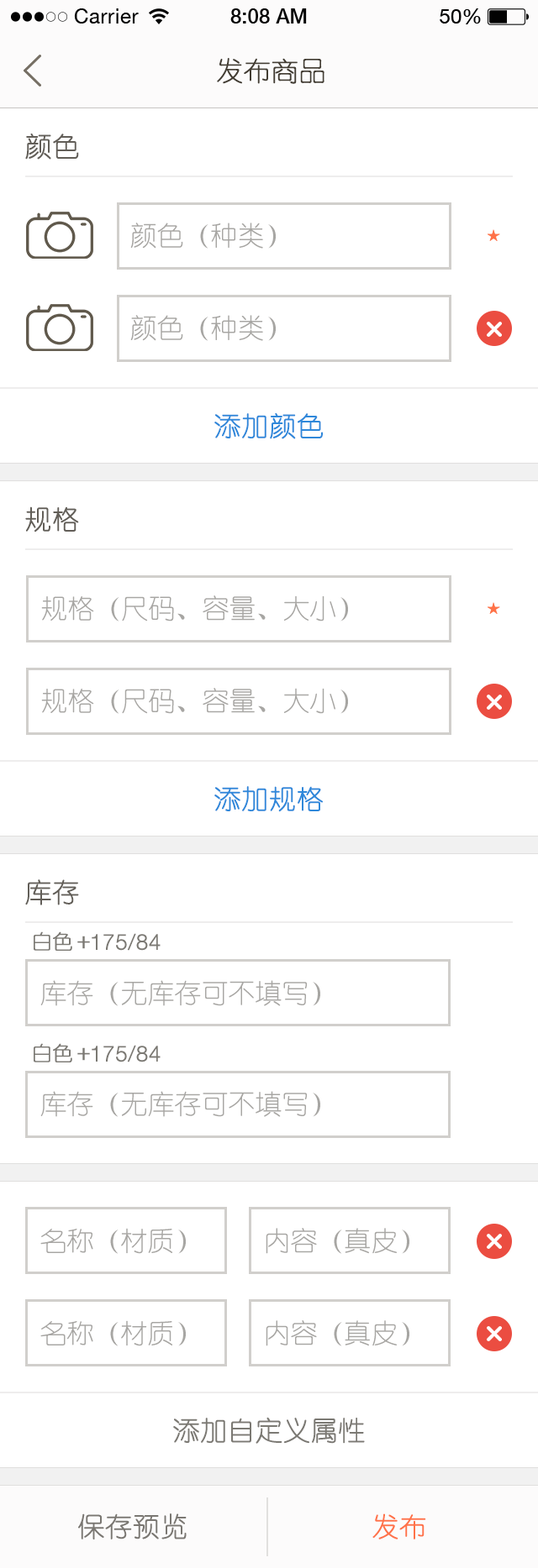
<style>
.page{position:relative;width:538px;height:1568px;background:#ffffff}
.page>*{position:absolute;margin:0}
.t1{font:26.9px "YouYuan";color:#433d33;text-transform:uppercase;font-weight:bold}
.t2{font:26.9px "YouYuan";color:#625e58;text-transform:uppercase;font-weight:bold}
.t3{font:26.9px "YouYuan";color:#a7a6a3;text-transform:uppercase}
.t4{font:26.9px "YouYuan";color:#2f88da;text-transform:uppercase;font-weight:bold}
.t5{font:20.2px "YouYuan";color:#7b7973;text-transform:uppercase;font-weight:bold}
.t6{font:21.8px "HelveticaNeueLTPro-Lt";color:#7b7973;text-transform:uppercase;font-weight:bold}
.t7{font:26.9px "YouYuan";color:#7b7973;text-transform:uppercase;font-weight:bold}
.t8{font:26.9px "YouYuan";color:#7a7772;text-transform:uppercase;font-weight:bold}
.t9{font:26.9px "YouYuan";color:#ff7248;text-transform:uppercase;font-weight:bold}
</style>
<div class="page">
<p class="t1" style="left:217px;top:58px;width:107px;height:26px">发布商品</p>
<p class="t2" style="left:25px;top:134px;width:54px;height:26px">颜色</p>
<p class="t3" style="left:130px;top:223px;width:145px;height:26px">颜色（种类）</p>
<p class="t3" style="left:130px;top:315px;width:145px;height:26px">颜色（种类）</p>
<p class="t4" style="left:214px;top:413px;width:109px;height:26px">添加颜色</p>
<p class="t2" style="left:25px;top:506px;width:54px;height:26px">规格</p>
<p class="t3" style="left:41px;top:595px;width:307px;height:26px">规格（尺码、容量、大小）</p>
<p class="t3" style="left:41px;top:688px;width:307px;height:26px">规格（尺码、容量、大小）</p>
<p class="t4" style="left:214px;top:786px;width:109px;height:26px">添加规格</p>
<p class="t2" style="left:25px;top:879px;width:54px;height:26px">库存</p>
<p class="t5" style="left:34px;top:931px;width:56px;height:20px">白色＋</p>
<p class="t6" style="left:92px;top:933px;width:68px;height:18px">175/84</p>
<p class="t3" style="left:40px;top:980px;width:280px;height:26px">库存（无库存可不填写）</p>
<p class="t5" style="left:34px;top:1043px;width:56px;height:19px">白色＋</p>
<p class="t6" style="left:92px;top:1045px;width:68px;height:17px">175/84</p>
<p class="t3" style="left:40px;top:1091px;width:280px;height:26px">库存（无库存可不填写）</p>
<p class="t3" style="left:40px;top:1228px;width:146px;height:26px">名称（材质）</p>
<p class="t3" style="left:265px;top:1228px;width:144px;height:26px">内容（真皮）</p>
<p class="t3" style="left:40px;top:1320px;width:146px;height:26px">名称（材质）</p>
<p class="t3" style="left:265px;top:1320px;width:144px;height:26px">内容（真皮）</p>
<p class="t7" style="left:173px;top:1417px;width:191px;height:27px">添加自定义属性</p>
<p class="t8" style="left:78px;top:1513px;width:108px;height:26px">保存预览</p>
<p class="t9" style="left:372px;top:1513px;width:54px;height:26px">发布</p>
</div>
